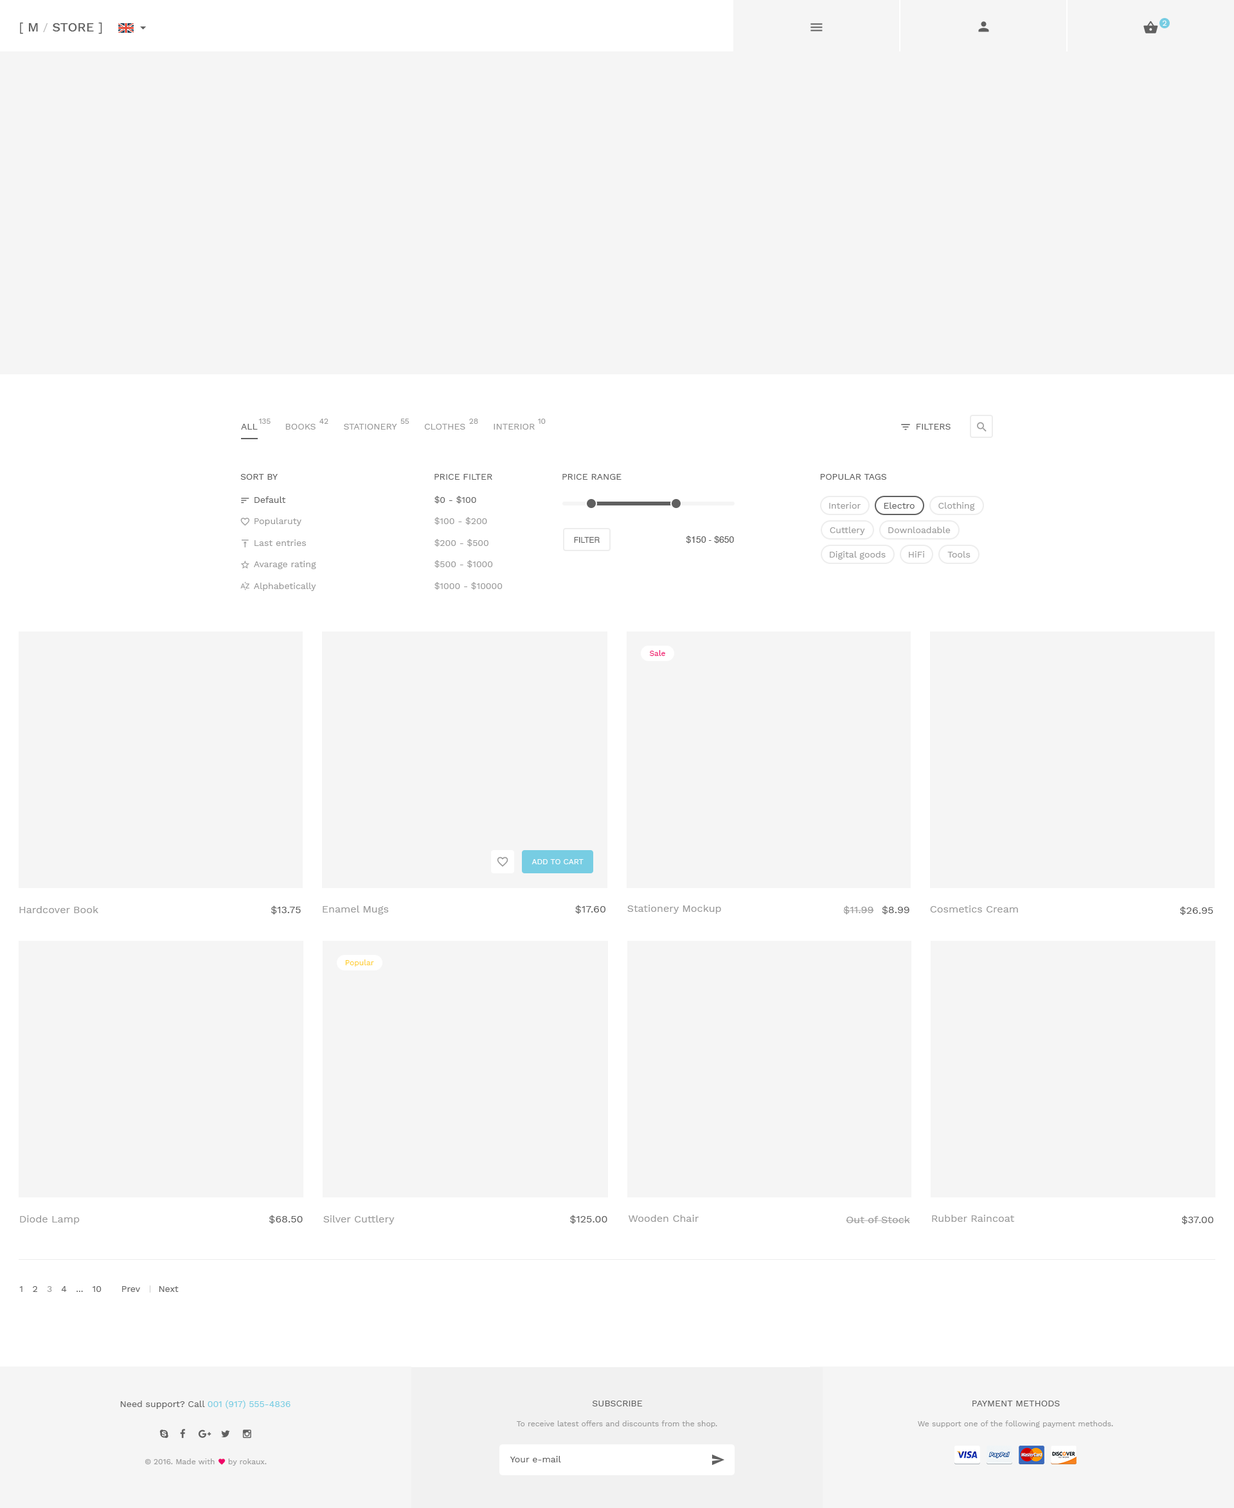
<style>
.page{position:relative;width:1234px;height:1508px;background:#f5f5f5}
.page>*{position:absolute;margin:0}
.t1{font:12.9px "WorkSans-Medium";color:#606060}
.t2{font:12.9px "WorkSans-Regular";color:#606060}
.t3{font:11.6px "WorkSans-Regular";color:#bababa}
.t4{font:7.7px "WorkSans-Regular";color:#fffefe}
.t5{font:9px "WorkSans-Regular";color:#999999;text-transform:uppercase}
.t6{font:9px "WorkSans-Regular";color:#606060;text-transform:uppercase}
.t7{font:7.7px "WorkSans-Regular";color:#999999}
.t8{font:9px "WorkSans-Regular";color:#999999}
.t9{font:9px "WorkSans-Regular";color:#606060}
.t10{font:7.7px "Helvetica";color:#606060;text-transform:uppercase}
.t11{font:9px "Helvetica";color:#606060;text-transform:uppercase}
.t12{font:7.7px "WorkSans-Regular";color:#ef0568}
.t13{font:7.7px "WorkSans-Regular";color:#ffffff;text-transform:uppercase}
.t14{font:10.3px "WorkSans-Regular";color:#999999}
.t15{font:10.3px "WorkSans-Regular";color:#606060}
.t16{font:7.7px "WorkSans-Regular";color:#ffce2b}
.t17{font:9px "WorkSans-Regular";color:#77cde3}
</style>
<div class="page">
<p class="t1" style="left:20px;top:22px;width:82px;height:12px"><span class="t2">[</span> M <span class="t3">/ </span>STORE <span class="t2">]</span></p>
<p class="t4" style="left:1163px;top:21px;width:4px;height:5px">2</p>
<p class="t5" style="left:241px;top:424px;width:294px;height:5px"><span class="t6">All         </span>Books         Stationery         Clothes         Interior</p>
<p class="t7" style="left:258px;top:419px;width:13px;height:5px">135</p>
<p class="t7" style="left:320px;top:419px;width:8px;height:5px">42</p>
<p class="t7" style="left:401px;top:419px;width:9px;height:5px">55</p>
<p class="t7" style="left:469px;top:419px;width:9px;height:5px">28</p>
<p class="t7" style="left:538px;top:419px;width:8px;height:5px">10</p>
<p class="t6" style="left:917px;top:424px;width:34px;height:5px">Filters</p>
<p class="t6" style="left:240px;top:474px;width:38px;height:6px">Sort By</p>
<p class="t6" style="left:435px;top:474px;width:57px;height:6px">Price Filter</p>
<p class="t6" style="left:562px;top:474px;width:60px;height:6px">Price Range</p>
<p class="t6" style="left:820px;top:474px;width:67px;height:6px">Popular Tags</p>
<p class="t8" style="left:254px;top:496px;width:62px;height:95px"><span class="t9">Default<br><br></span>Popularuty<br><br>Last entries<br><br>Avarage rating<br><br>Alphabetically</p>
<p class="t8" style="left:435px;top:496px;width:68px;height:94px"><span class="t9">$0 - $100<br><br></span>$100 - $200<br><br>$200 - $500<br><br>$500 - $1000<br><br>$1000 - $10000</p>
<p class="t8" style="left:829px;top:502px;width:32px;height:7px">Interior</p>
<p class="t9" style="left:884px;top:502px;width:31px;height:7px">Electro</p>
<p class="t8" style="left:939px;top:502px;width:36px;height:8px">Clothing</p>
<p class="t8" style="left:830px;top:526px;width:35px;height:9px">Cuttlery</p>
<p class="t8" style="left:888px;top:526px;width:63px;height:7px">Downloadable</p>
<p class="t10" style="left:574px;top:537px;width:26px;height:6px">Filter</p>
<p class="t11" style="left:686px;top:536px;width:48px;height:7px">$150 - $650</p>
<p class="t8" style="left:830px;top:551px;width:56px;height:8px">Digital goods</p>
<p class="t8" style="left:909px;top:551px;width:16px;height:6px">HiFi</p>
<p class="t8" style="left:948px;top:551px;width:23px;height:6px">Tools</p>
<p class="t12" style="left:650px;top:650px;width:15px;height:6px">Sale</p>
<p class="t13" style="left:532px;top:859px;width:52px;height:5px">Add To Cart</p>
<p class="t14" style="left:19px;top:906px;width:79px;height:7px">Hardcover Book</p>
<p class="t15" style="left:271px;top:905px;width:30px;height:9px">$13.75</p>
<p class="t14" style="left:323px;top:905px;width:66px;height:9px">Enamel Mugs</p>
<p class="t15" style="left:575px;top:905px;width:31px;height:9px">$17.60</p>
<p class="t14" style="left:627px;top:905px;width:94px;height:9px">Stationery Mockup</p>
<p class="t14" style="left:843px;top:905px;width:31px;height:9px">$11.99</p>
<p class="t15" style="left:882px;top:905px;width:28px;height:9px">$8.99</p>
<p class="t14" style="left:930px;top:905px;width:88px;height:7px">Cosmetics Cream</p>
<p class="t15" style="left:1180px;top:906px;width:34px;height:9px">$26.95</p>
<p class="t16" style="left:345px;top:959px;width:29px;height:7px">Popular</p>
<p class="t14" style="left:20px;top:1215px;width:60px;height:9px">Diode Lamp</p>
<p class="t15" style="left:269px;top:1214px;width:34px;height:9px">$68.50</p>
<p class="t14" style="left:323px;top:1215px;width:72px;height:9px">Silver Cuttlery</p>
<p class="t15" style="left:570px;top:1214px;width:38px;height:9px">$125.00</p>
<p class="t14" style="left:629px;top:1214px;width:70px;height:7px">Wooden Chair</p>
<p class="t14" style="left:846px;top:1216px;width:64px;height:7px">Out of Stock</p>
<p class="t14" style="left:932px;top:1214px;width:82px;height:7px">Rubber Raincoat</p>
<p class="t15" style="left:1182px;top:1215px;width:32px;height:9px">$37.00</p>
<p class="t9" style="left:19px;top:1286px;width:83px;height:6px">1   2   <span class="t8">3</span>   4   ...   10</p>
<p class="t9" style="left:122px;top:1286px;width:57px;height:6px">Prev      Next</p>
<p class="t9" style="left:120px;top:1400px;width:171px;height:8px">Need support? Call <span class="t17">001 (917) 555-4836</span></p>
<p class="t6" style="left:592px;top:1400px;width:51px;height:6px">Subscribe</p>
<p class="t6" style="left:973px;top:1400px;width:87px;height:6px">Payment Methods</p>
<p class="t7" style="left:517px;top:1420px;width:200px;height:7px">To receive latest offers and discounts from the shop.</p>
<p class="t7" style="left:918px;top:1420px;width:195px;height:7px">We support one of the following payment methods.</p>
<p class="t9" style="left:510px;top:1455px;width:51px;height:7px">Your e-mail</p>
<p class="t7" style="left:145px;top:1458px;width:122px;height:7px">© 2016. Made with     by rokaux.</p>
</div>
